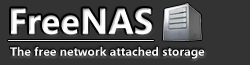
<style>
.page{position:relative;width:250px;height:65px;background:#333333}
.page>*{position:absolute;margin:0}
.t1{font:36px "SegoeUI-Bold";color:#ffffff}
.t2{font:12px "SegoeUI-Bold";color:#ffffff}
</style>
<div class="page">
<p class="t1" style="left:11px;top:8px;width:141px;height:27px">FreeNAS</p>
<p class="t2" style="left:10px;top:46px;width:195px;height:13px">The free network attached storage</p>
</div>
